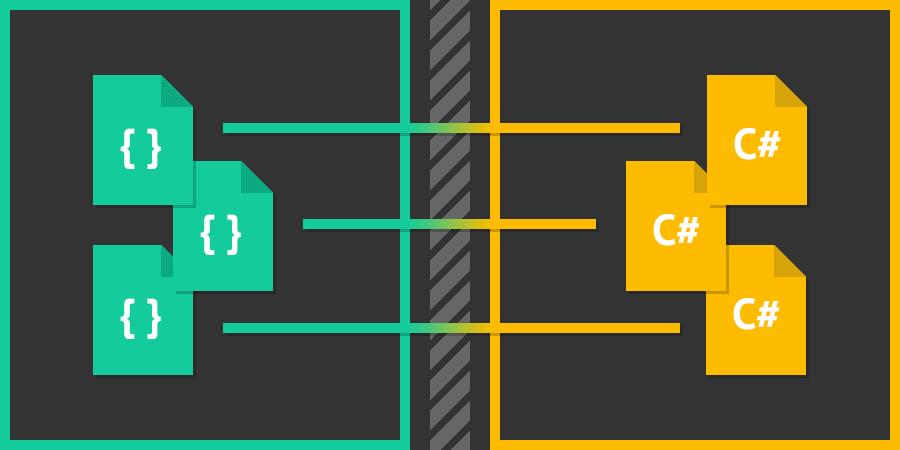
<style>
.page{position:relative;width:900px;height:450px;background:#333333}
.page>*{position:absolute;margin:0}
.t1{font:43.3px "PTSans-Bold";color:#ffffff;text-transform:uppercase}
</style>
<div class="page">
<p class="t1" style="left:120px;top:128px;width:41px;height:41px">{ }</p>
<p class="t1" style="left:734px;top:128px;width:47px;height:32px">c#</p>
<p class="t1" style="left:200px;top:214px;width:41px;height:41px">{ }</p>
<p class="t1" style="left:653px;top:214px;width:47px;height:32px">c#</p>
<p class="t1" style="left:120px;top:298px;width:41px;height:41px">{ }</p>
<p class="t1" style="left:733px;top:298px;width:47px;height:32px">c#</p>
</div>
